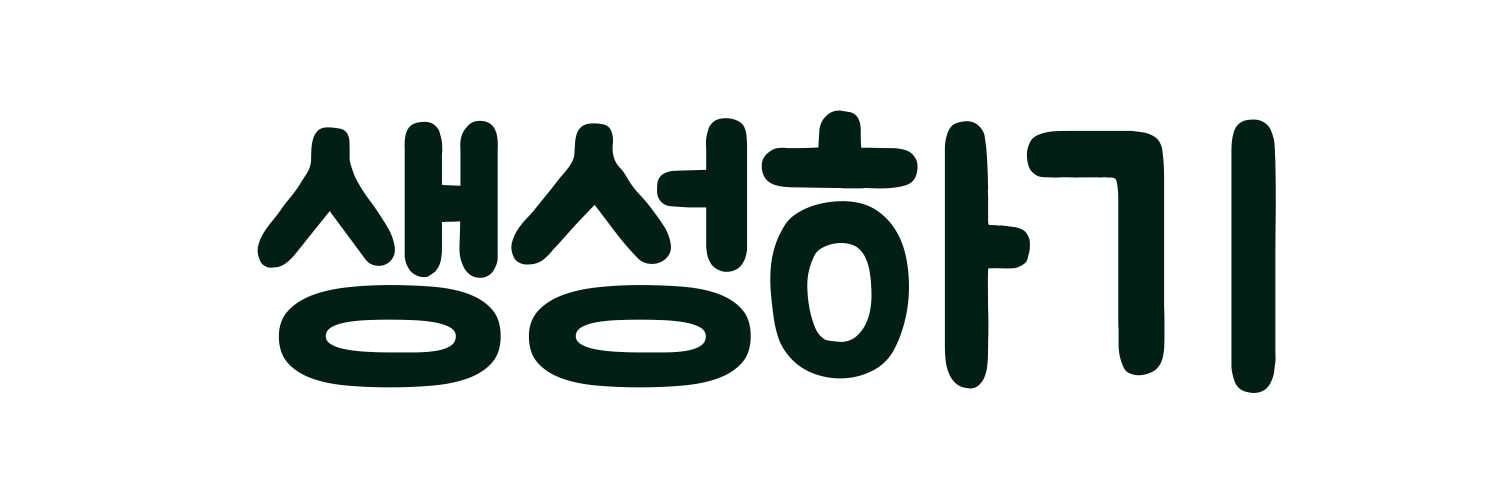
<style>
.page{position:relative;width:1500px;height:500px;background:#ffffff}
.page>*{position:absolute;margin:0}
.t1{font:331.6px "BMJUA";letter-spacing:-0.02em;color:#011f17}
</style>
<div class="page">
<p class="t1" style="left:257px;top:110px;width:1019px;height:283px">생성하기</p>
</div>
